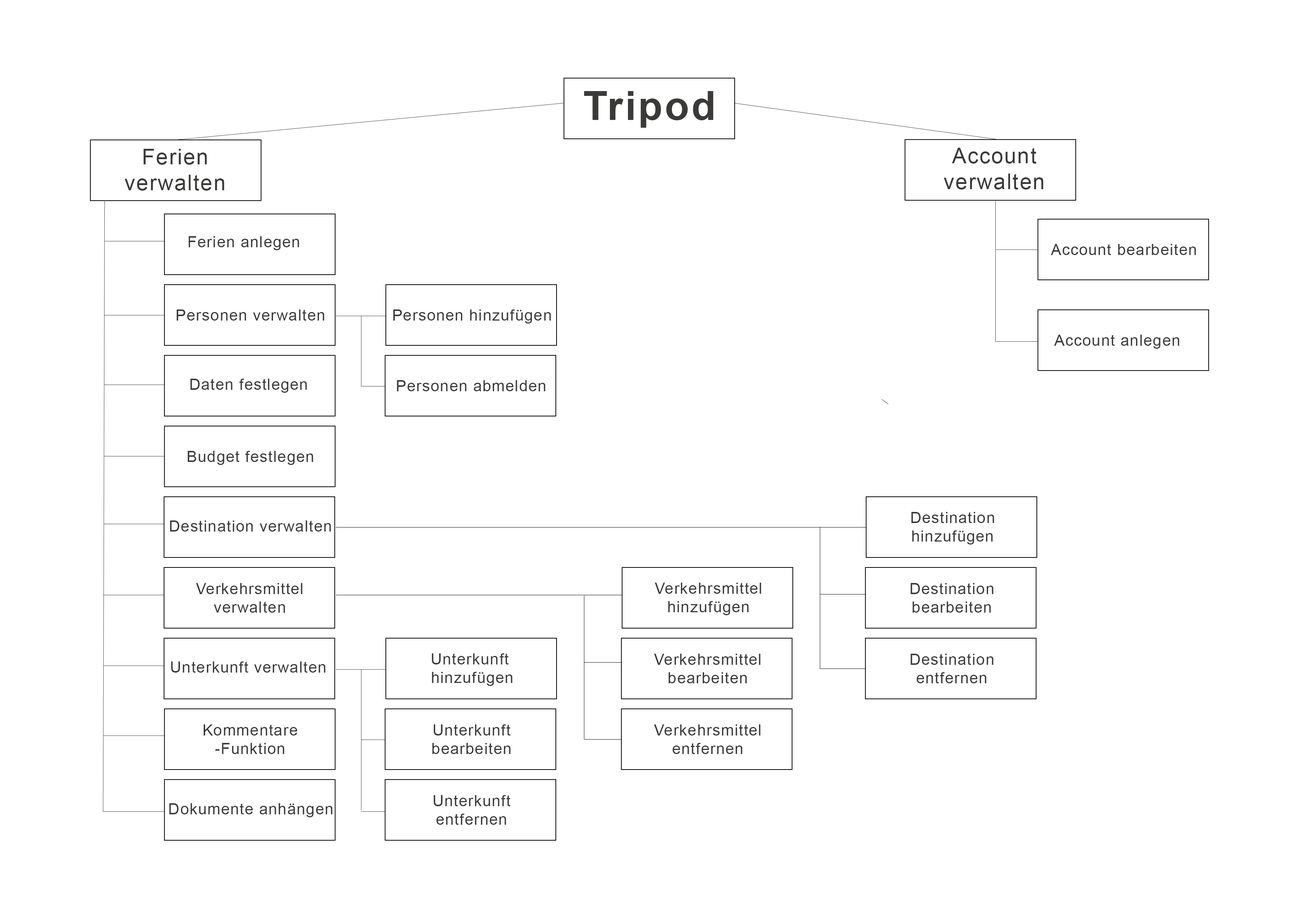
<style>
.page{position:relative;width:1299px;height:918px;background:#ffffff}
.page>*{position:absolute;margin:0}
.t1{font:40.1px "Arial-BoldMT";letter-spacing:0.05em;color:#3b3a38}
.t2{font:21.6px "ArialMT";letter-spacing:0.05em;color:#3b3a38}
.t3{font:15.4px "ArialMT";letter-spacing:0.05em;color:#3b3a38}
</style>
<div class="page">
<p class="t1" style="left:584px;top:91px;width:129px;height:37px">Tripod</p>
<p class="t2" style="left:124px;top:149px;width:100px;height:42px;text-align:center">Ferien<br>verwalten</p>
<p class="t2" style="left:943px;top:148px;width:100px;height:42px;text-align:center">Account<br>verwalten</p>
<p class="t3" style="left:188px;top:236px;width:111px;height:14px">Ferien anlegen</p>
<p class="t3" style="left:1050px;top:244px;width:146px;height:11px">Account bearbeiten</p>
<p class="t3" style="left:177px;top:310px;width:147px;height:11px">Personen verwalten</p>
<p class="t3" style="left:393px;top:310px;width:158px;height:14px">Personen hinzufügen</p>
<p class="t3" style="left:1054px;top:335px;width:125px;height:14px">Account anlegen</p>
<p class="t3" style="left:190px;top:379px;width:117px;height:14px">Daten festlegen</p>
<p class="t3" style="left:397px;top:380px;width:148px;height:11px">Personen abmelden</p>
<p class="t3" style="left:188px;top:451px;width:125px;height:14px">Budget festlegen</p>
<p class="t3" style="left:170px;top:521px;width:161px;height:11px">Destination verwalten</p>
<p class="t3" style="left:911px;top:512px;width:83px;height:33px;text-align:center">Destination<br>hinzufügen</p>
<p class="t3" style="left:196px;top:583px;width:106px;height:30px;text-align:center">Verkehrsmittel<br>verwalten</p>
<p class="t3" style="left:655px;top:583px;width:106px;height:32px;text-align:center">Verkehrsmittel<br>hinzufügen</p>
<p class="t3" style="left:910px;top:583px;width:83px;height:30px;text-align:center">Destination<br>bearbeiten</p>
<p class="t3" style="left:432px;top:653px;width:80px;height:33px;text-align:center">Unterkunft <br>hinzufügen</p>
<p class="t3" style="left:654px;top:654px;width:106px;height:29px;text-align:center">Verkehrsmittel<br>bearbeiten</p>
<p class="t3" style="left:910px;top:654px;width:83px;height:29px;text-align:center">Destination<br>entfernen</p>
<p class="t3" style="left:171px;top:662px;width:154px;height:11px">Unterkunft verwalten</p>
<p class="t3" style="left:204px;top:725px;width:93px;height:29px;text-align:center">Kommentare<br>-Funktion</p>
<p class="t3" style="left:432px;top:725px;width:79px;height:29px;text-align:center">Unterkunft<br>bearbeiten</p>
<p class="t3" style="left:654px;top:725px;width:106px;height:29px;text-align:center">Verkehrsmittel<br>entfernen</p>
<p class="t3" style="left:434px;top:795px;width:77px;height:30px;text-align:center">Unterkunft<br>entfernen</p>
<p class="t3" style="left:169px;top:803px;width:163px;height:14px">Dokumente anhängen</p>
</div>
